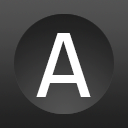
<style>
.page{position:relative;width:128px;height:128px}
.page>*{position:absolute;margin:0}
.t1{font:100px "Consolas";color:#ffffff}
</style>
<div class="page">
<p class="t1" style="left:36px;top:33px;width:55px;height:64px">A</p>
</div>
